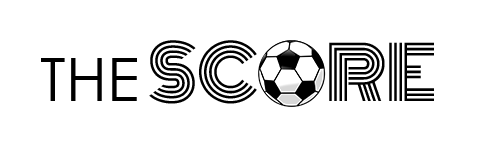
<style>
.page{position:relative;width:486px;height:160px;background:#ffffff}
.page>*{position:absolute;margin:0}
.t1{font:72px "Monoton-Regular";color:#000000}
.t2{font:60px "CenturyGothic";color:#000000}
</style>
<div class="page">
<p class="t1" style="left:149px;top:40px;width:285px;height:64px">SCORE</p>
<p class="t2" style="left:41px;top:58px;width:96px;height:43px">THE</p>
</div>
